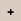
<style>
.page{position:relative;width:21px;height:21px;background:#d9cdc1}
.page>*{position:absolute;margin:0}
.t1{font:9px "Tahoma-Bold";color:#000000}
</style>
<div class="page">
<p class="t1" style="left:7px;top:9px;width:7px;height:6px">+</p>
</div>
